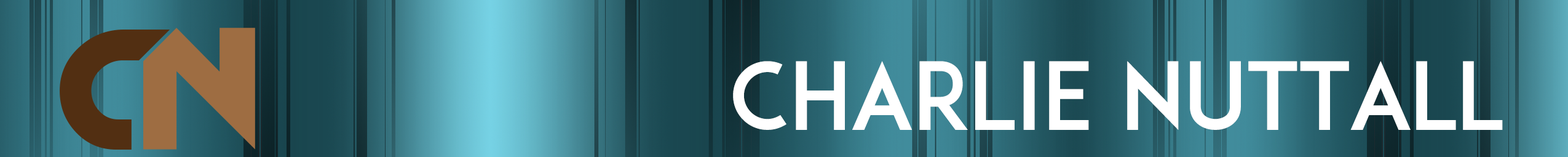
<style>
.page{position:relative;width:1568px;height:157px}
.page>*{position:absolute;margin:0}
.t1{font:92.2px "ADAM";color:#ffffff}
</style>
<div class="page">
<p class="t1" style="left:733px;top:61px;width:770px;height:69px">Charlie Nuttall</p>
</div>
